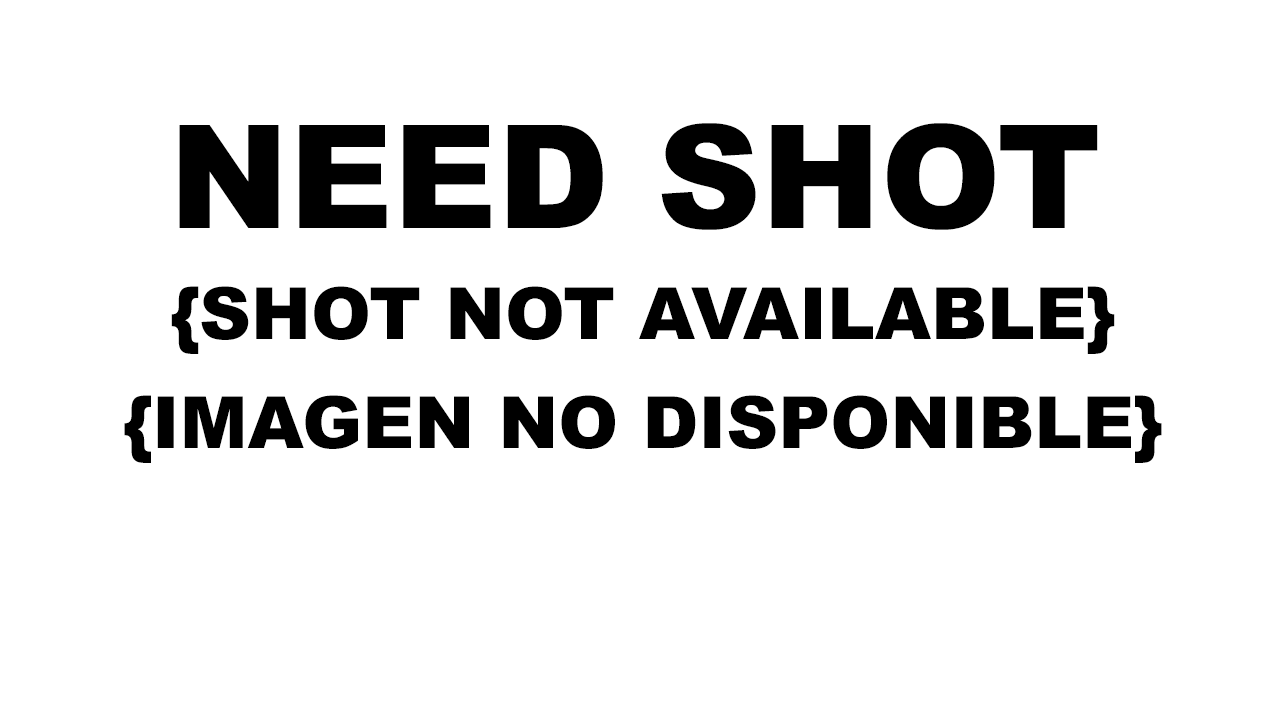
<style>
.page{position:relative;width:1280px;height:720px;background:#ffffff}
.page>*{position:absolute;margin:0}
.t1{font:144px "Arial-Black";color:#000000;text-transform:uppercase}
.t2{font:72px "Arial-Black";color:#000000;text-transform:uppercase}
</style>
<div class="page">
<p class="t1" style="left:179px;top:123px;width:919px;height:107px">Need Shot</p>
<p class="t2" style="left:171px;top:286px;width:944px;height:68px">{shot not available}</p>
<p class="t2" style="left:124px;top:395px;width:1038px;height:68px">{imagen no disponible}</p>
</div>
